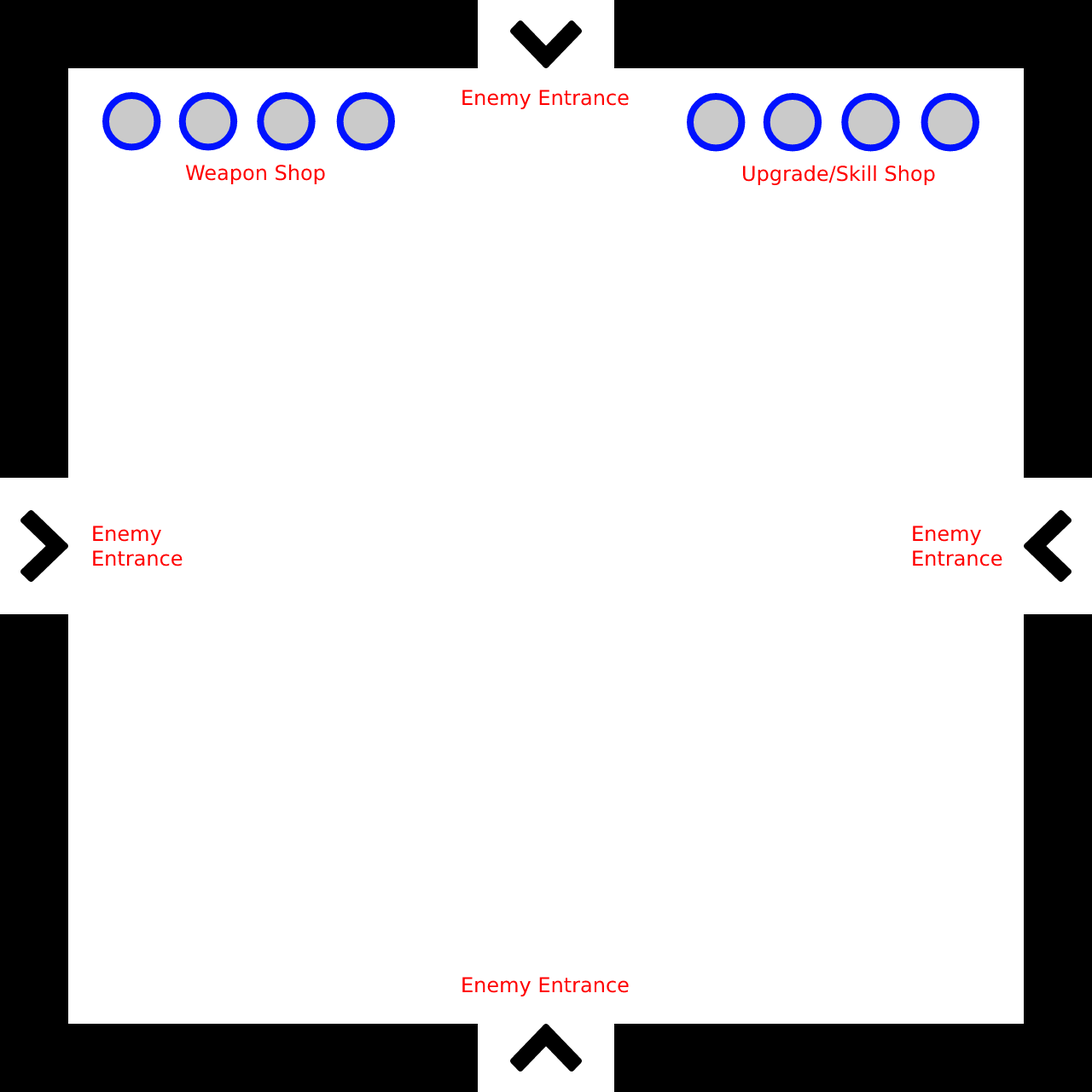
<style>
.page{position:relative;width:1092px;height:1092px;background:#ffffff}
.page>*{position:absolute;margin:0}
.t1{font:20.5px "DejaVuSans";color:#ff0000}
</style>
<div class="page">
<p class="t1" style="left:462px;top:90px;width:167px;height:19px">Enemy Entrance</p>
<p class="t1" style="left:185px;top:164px;width:140px;height:20px">Weapon Shop</p>
<p class="t1" style="left:743px;top:165px;width:192px;height:20px">Upgrade/Skill Shop</p>
<p class="t1" style="left:93px;top:526px;width:90px;height:40px">Enemy <br>Entrance</p>
<p class="t1" style="left:913px;top:526px;width:89px;height:40px">Enemy <br>Entrance</p>
<p class="t1" style="left:462px;top:977px;width:167px;height:19px">Enemy Entrance</p>
</div>
